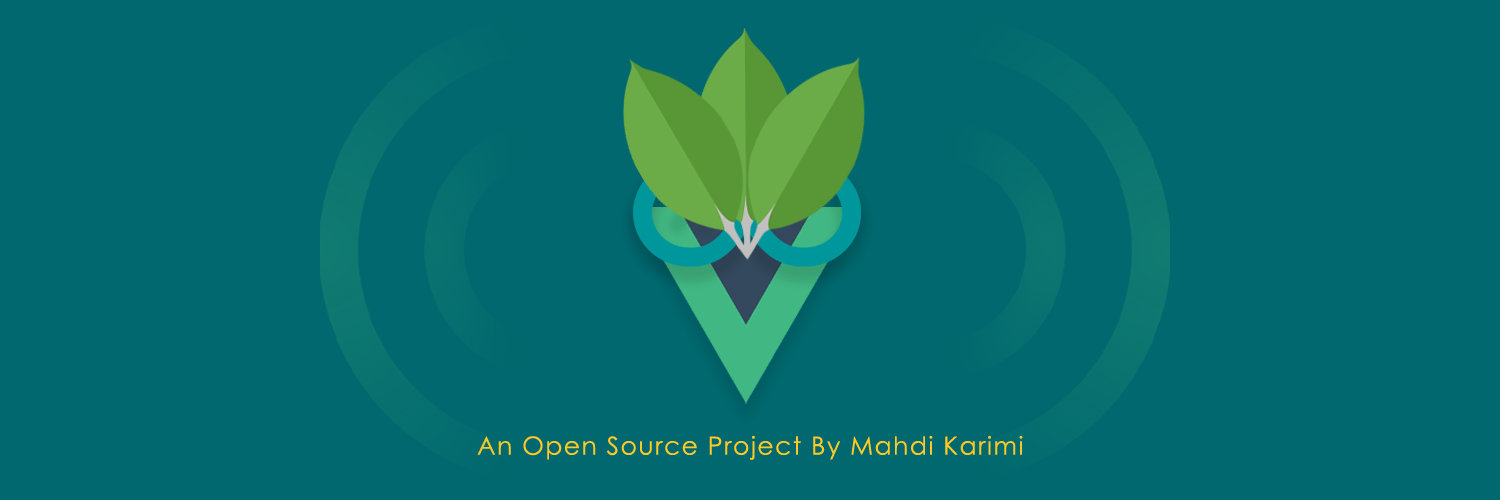
<style>
.page{position:relative;width:1500px;height:500px;background:#00686e}
.page>*{position:absolute;margin:0}
.t1{font:24.9px "CenturyGothic";letter-spacing:0.06em;color:#ffca28}
</style>
<div class="page">
<p class="t1" style="left:477px;top:435px;width:546px;height:25px">An Open Source Project By Mahdi Karimi</p>
</div>
